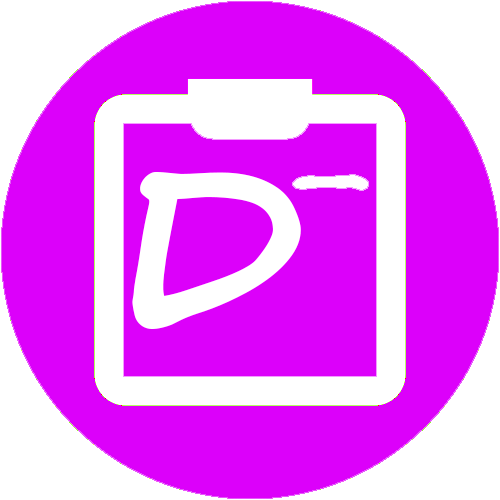
<style>
.page{position:relative;width:500px;height:500px;background:#dc00fa}
.page>*{position:absolute;margin:0}
.t1{font:233.3px "SegoeScript-Bold";color:#ffffff}
</style>
<div class="page">
<p class="t1" style="left:132px;top:172px;width:169px;height:157px">D</p>
</div>
